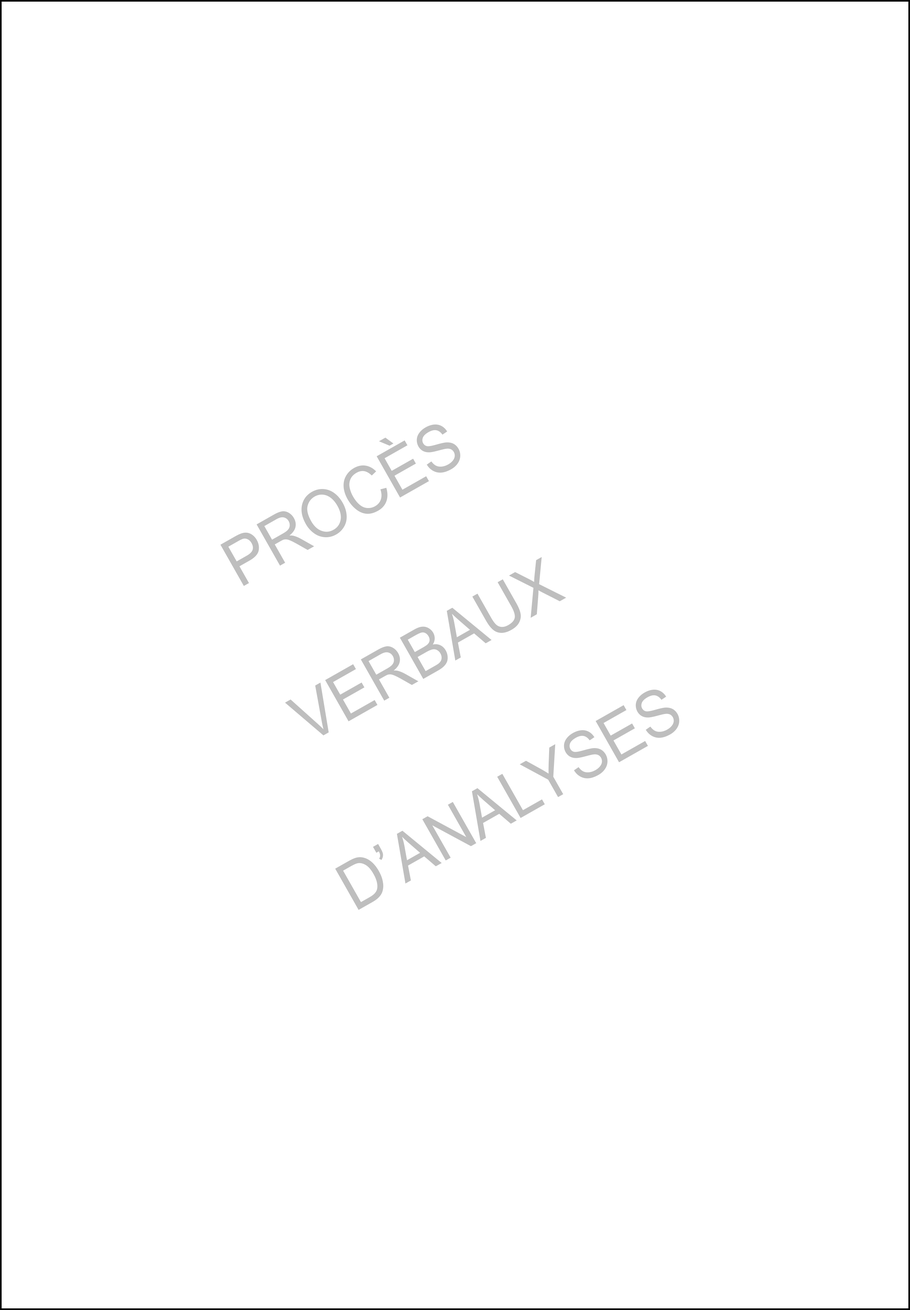
<style>
.page{position:relative;width:910px;height:1310px;background:#ffffff}
.page>*{position:absolute;margin:0}
.t1{font:66.2px/169.3px "ArialMT";color:#bebebe;scale:0.94 1}
</style>
<div class="page">
<p class="t1" style="left:220px;top:424px;width:459px;height:486px;text-align:center;rotate:-30deg">PROCÈS<br>VERBAUX<br>D’ANALYSES</p>
</div>
